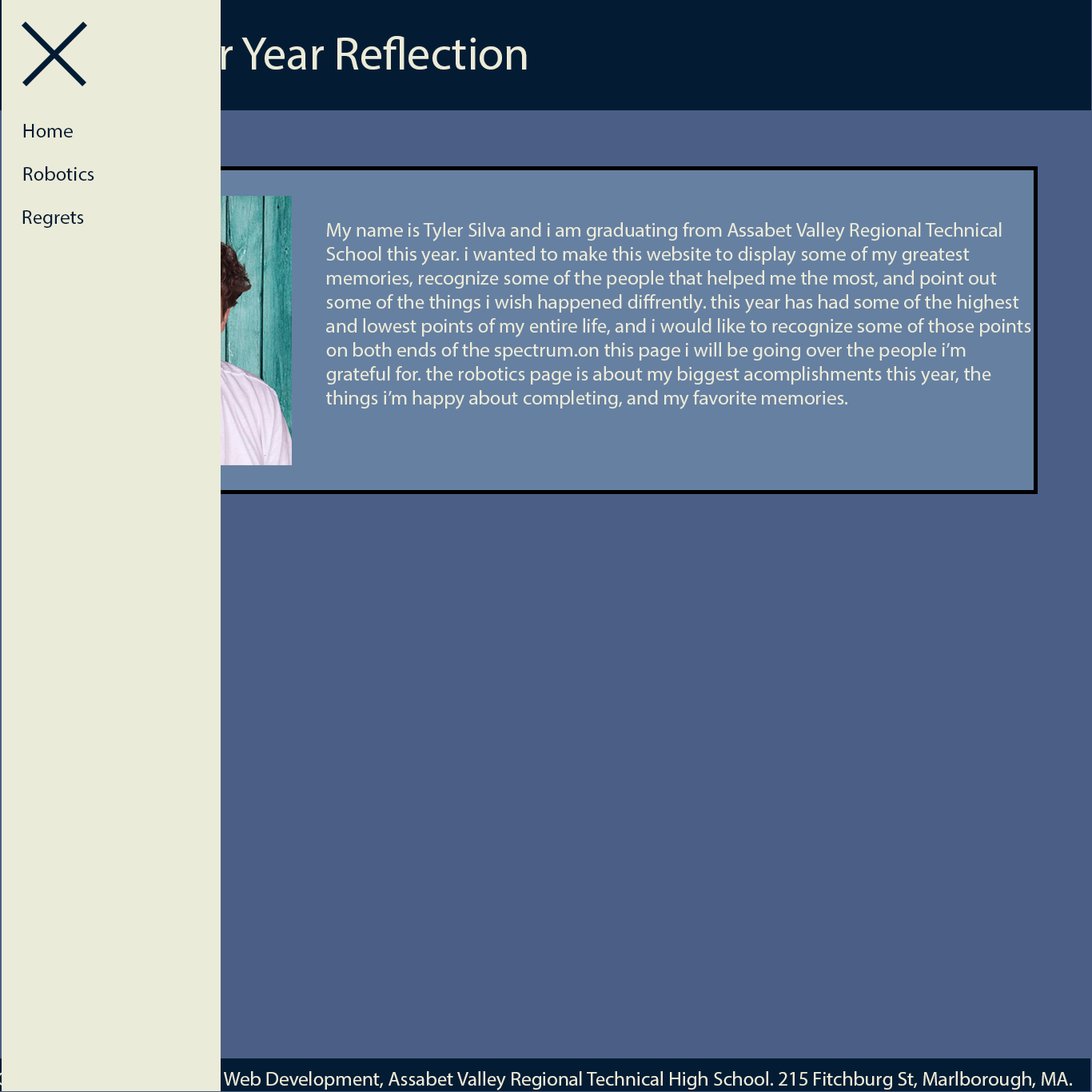
<style>
.page{position:relative;width:1092px;height:1092px;background:#4b5e86}
.page>*{position:absolute;margin:0}
.t1{font:46.6px "MyriadPro-Regular";color:#ebebd9}
.t2{font:20px "MyriadPro-Regular";color:#031c34}
.t3{font:20px "MyriadPro-Regular";color:#ebebd9}
</style>
<div class="page">
<p class="t1" style="left:111px;top:36px;width:416px;height:34px">Senior Year Reflection</p>
<p class="t2" style="left:23px;top:124px;width:50px;height:13px">Home</p>
<p class="t2" style="left:23px;top:166px;width:71px;height:15px">Robotics</p>
<p class="t2" style="left:22px;top:210px;width:62px;height:18px">Regrets</p>
<p class="t3" style="left:326px;top:222px;width:705px;height:187px">My name is Tyler Silva and i am graduating from Assabet Valley Regional Technical <br>School this year. i wanted to make this website to display some of my greatest <br>memories, recognize some of the people that helped me the most, and point out <br>some of the things i wish happened diffrently. this year has had some of the highest<br>and lowest points of my entire life, and i would like to recognize some of those points<br>on both ends of the spectrum.on this page i will be going over the people i’m <br>grateful for. the robotics page is about my biggest acomplishments this year, the<br>things i’m happy about completing, and my favorite memories.</p>
</div>
